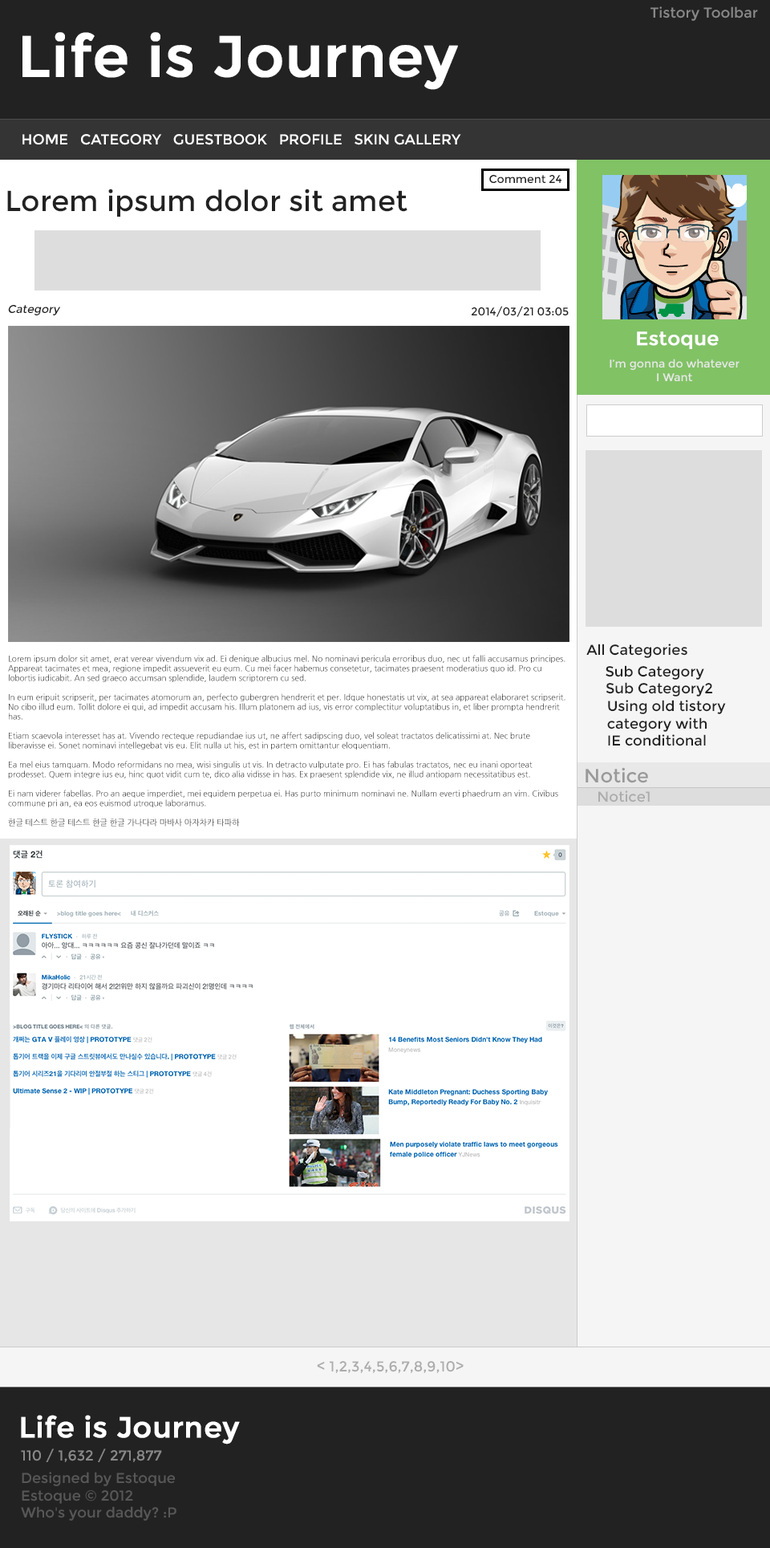
<style>
.page{position:relative;width:770px;height:1548px;background:#ffffff}
.page>*{position:absolute;margin:0}
.t1{font:14.4px "Montserrat-Regular";color:#888888}
.t2{font:57.8px "Montserrat-Regular";color:#ffffff;font-weight:bold}
.t3{font:14.4px "Montserrat-Regular";color:#ffffff}
.t4{font:11.2px "Montserrat-Regular";color:#222222}
.t5{font:28.9px "Montserrat-Regular";color:#222222}
.t6{font:11.2px "Montserrat-Regular";color:#222222;font-style:italic}
.t7{font:19.3px "Montserrat-Regular";color:#ffffff;font-weight:bold}
.t8{font:11.2px "Montserrat-Regular";color:#e8e8e8}
.t9{font:14.4px "Montserrat-Regular";color:#222222}
.t10{font:8px "NanumGothic";color:#222222}
.t11{font:19.3px "Montserrat-Regular";color:#999999}
.t12{font:14.4px "Montserrat-Regular";color:#acacac}
.t13{font:28.9px "Montserrat-Regular";color:#ffffff;font-weight:bold}
.t14{font:14.4px "Montserrat-Regular";color:#575757}
</style>
<div class="page">
<p class="t1" style="left:651px;top:6px;width:107px;height:15px">Tistory Toolbar</p>
<p class="t2" style="left:22px;top:32px;width:436px;height:58px">Life is Journey</p>
<p class="t3" style="left:22px;top:134px;width:439px;height:11px">HOME   CATEGORY   GUESTBOOK   PROFILE   SKIN GALLERY</p>
<p class="t4" style="left:489px;top:175px;width:73px;height:8px">Comment 24</p>
<p class="t5" style="left:7px;top:189px;width:401px;height:28px">Lorem ipsum dolor sit amet</p>
<p class="t6" style="left:8px;top:305px;width:53px;height:10px">Category</p>
<p class="t4" style="left:472px;top:306px;width:97px;height:11px">2014/03/21 03:05</p>
<p class="t7" style="left:637px;top:331px;width:82px;height:18px">Estoque</p>
<p class="t8" style="left:610px;top:359px;width:130px;height:22px;text-align:center">I’m gonna do whatever<br>I Want</p>
<p class="t9" style="left:587px;top:644px;width:101px;height:14px">All Categories</p>
<p class="t10" style="left:8px;top:655px;width:558px;height:172px">Lorem ipsum dolor sit amet, erat verear vivendum vix ad. Ei denique albucius mel. No nominavi pericula erroribus duo, nec ut falli accusamus principes. Appareat tacimates et mea, regione impedit assueverit eu eum. Cu mei facer habemus consetetur, tacimates praesent moderatius quo id. Pro cu lobortis iudicabit. An sed graeco accumsan splendide, laudem scriptorem cu sed.<br><br>In eum eripuit scripserit, per tacimates atomorum an, perfecto gubergren hendrerit et per. Idque honestatis ut vix, at sea appareat elaboraret scripserit. No cibo illud eum. Tollit dolore ei qui, ad impedit accusam his. Illum platonem ad ius, vis error complectitur voluptatibus in, et liber prompta hendrerit has.<br><br>Etiam scaevola interesset has at. Vivendo recteque repudiandae ius ut, ne affert sadipscing duo, vel soleat tractatos delicatissimi at. Nec brute liberavisse ei. Sonet nominavi intellegebat vis eu. Elit nulla ut his, est in partem omittantur eloquentiam.<br><br>Ea mel eius tamquam. Modo reformidans no mea, wisi singulis ut vis. In detracto vulputate pro. Ei has fabulas tractatos, nec eu inani oporteat prodesset. Quem integre ius eu, hinc quot vidit cum te, dico alia vidisse in has. Ex praesent splendide vix, ne illud antiopam necessitatibus est.<br><br>Ei nam viderer fabellas. Pro an aeque imperdiet, mei equidem perpetua ei. Has purto minimum nominavi ne. Nullam everti phaedrum an vim. Civibus commune pri an, ea eos euismod utroque laboramus.<br><br>한글 테스트 한글 테스트 한글 한글 가나다라 마바사 아자차카 타파하</p>
<p class="t9" style="left:606px;top:665px;width:99px;height:15px">Sub Category</p>
<p class="t9" style="left:606px;top:682px;width:107px;height:15px">Sub Category2</p>
<p class="t9" style="left:607px;top:700px;width:119px;height:46px">Using old tistory<br>category with<br>IE conditional</p>
<p class="t11" style="left:586px;top:767px;width:62px;height:16px">Notice</p>
<p class="t12" style="left:599px;top:790px;width:51px;height:12px">Notice1</p>
<p class="t12" style="left:317px;top:1361px;width:147px;height:12px">&lt; 1,2,3,4,5,6,7,8,9,10&gt;</p>
<p class="t13" style="left:21px;top:1415px;width:219px;height:29px">Life is Journey</p>
<p class="t1" style="left:21px;top:1448px;width:141px;height:14px">110 / 1,632 / 271,877</p>
<p class="t14" style="left:21px;top:1472px;width:156px;height:49px">Designed by Estoque<br>Estoque © 2012<br>Who's your daddy? :P</p>
</div>
